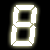
<style>
.page{position:relative;width:50px;height:50px;background:#000000}
.page>*{position:absolute;margin:0}
.t1{font:55px "LiquidCrystal";color:#ffffff}
</style>
<div class="page">
<p class="t1" style="left:11px;top:5px;width:26px;height:41px">8</p>
</div>
